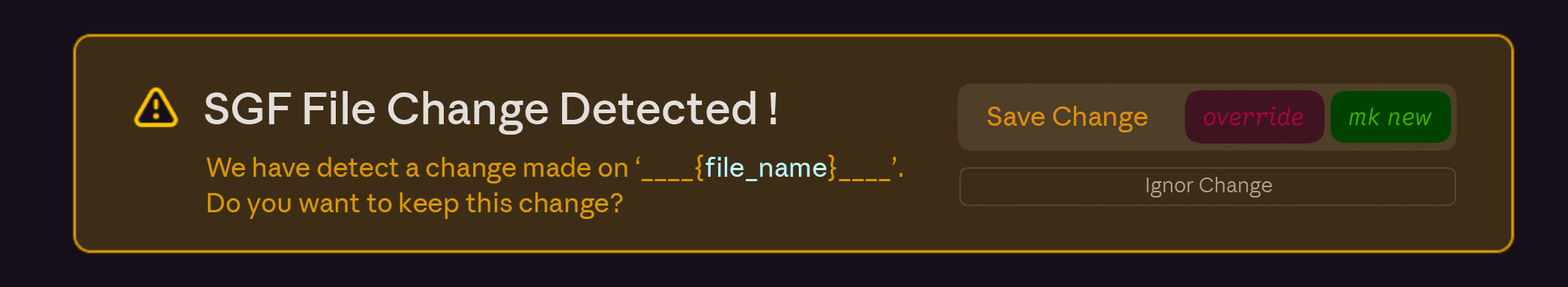
<style>
.page{position:relative;width:1568px;height:287px;background:#3e2d16}
.page>*{position:absolute;margin:0}
.t1{font:44.4px "AnthropicSansText-Medium";color:#e2dfdb}
.t2{font:26.6px "AnthropicSansText-Regular";color:#dc8f0a}
.t3{font:23.7px "GoogleSansCodeProportional-LightItalic";color:#b10043}
.t4{font:23.7px "GoogleSansCodeProportional-LightItalic";color:#3eb100}
.t5{font:26.6px/35.5px "AnthropicSansText-Regular";color:#d79800}
.t6{font:26.6px/35.5px "AnthropicSansText-Regular";color:#bcf8ff}
.t7{font:20.7px "AnthropicSansText-Light";color:#b0a58e}
</style>
<div class="page">
<p class="t1" style="left:205px;top:91px;width:572px;height:44px">SGF File Change Detected !</p>
<p class="t2" style="left:987px;top:106px;width:161px;height:26px">Save Change</p>
<p class="t3" style="left:1204px;top:107px;width:99px;height:19px">override</p>
<p class="t4" style="left:1349px;top:107px;width:83px;height:19px">mk new</p>
<p class="t5" style="left:206px;top:155px;width:696px;height:64px">We have detect a change made on ‘____{<span class="t6">file_name</span>}____’.<br>Do you want to keep this change?</p>
<p class="t7" style="left:1146px;top:177px;width:126px;height:20px">Ignor Change</p>
</div>
